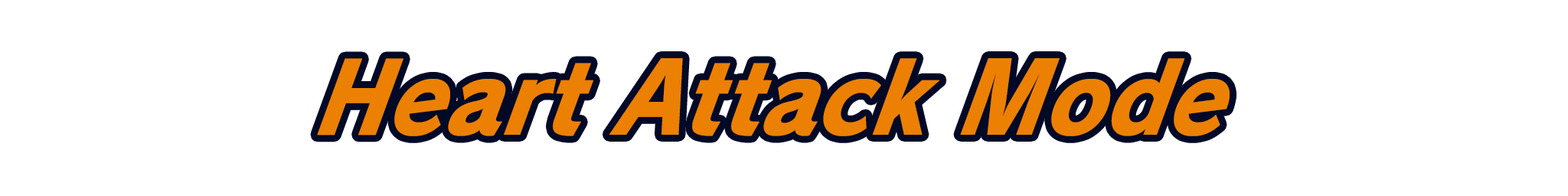
<style>
.page{position:relative;width:1568px;height:196px;background:#ffffff}
.page>*{position:absolute;margin:0}
.t1{font:104.1px "RodinPro-EB";letter-spacing:0.001em;color:#ec8002;scale:0.88 1}
</style>
<div class="page">
<p class="t1" style="left:317px;top:58px;width:913px;height:78px">Heart Attack Mode</p>
</div>
